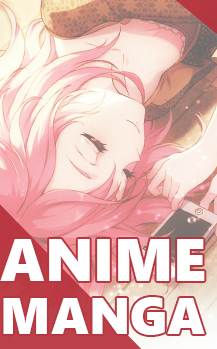
<style>
.page{position:relative;width:217px;height:349px}
.page>*{position:absolute;margin:0}
.t1{font:59.5px/53px "SegoeUIBlack";color:#ffffff}
.t2{font:51px/53px "SegoeUIBlack";color:#ffffff}
</style>
<div class="page">
<p class="t1" style="left:0px;top:239px;width:205px;height:96px">ANIME<br><span class="t2">MANGA</span></p>
</div>
